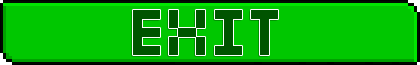
<style>
.page{position:relative;width:420px;height:65px;background:#00c700}
.page>*{position:absolute;margin:0}
.t1{font:72px "04b03";color:#005400}
</style>
<div class="page">
<p class="t1" style="left:133px;top:10px;width:145px;height:45px">EXIT</p>
</div>
